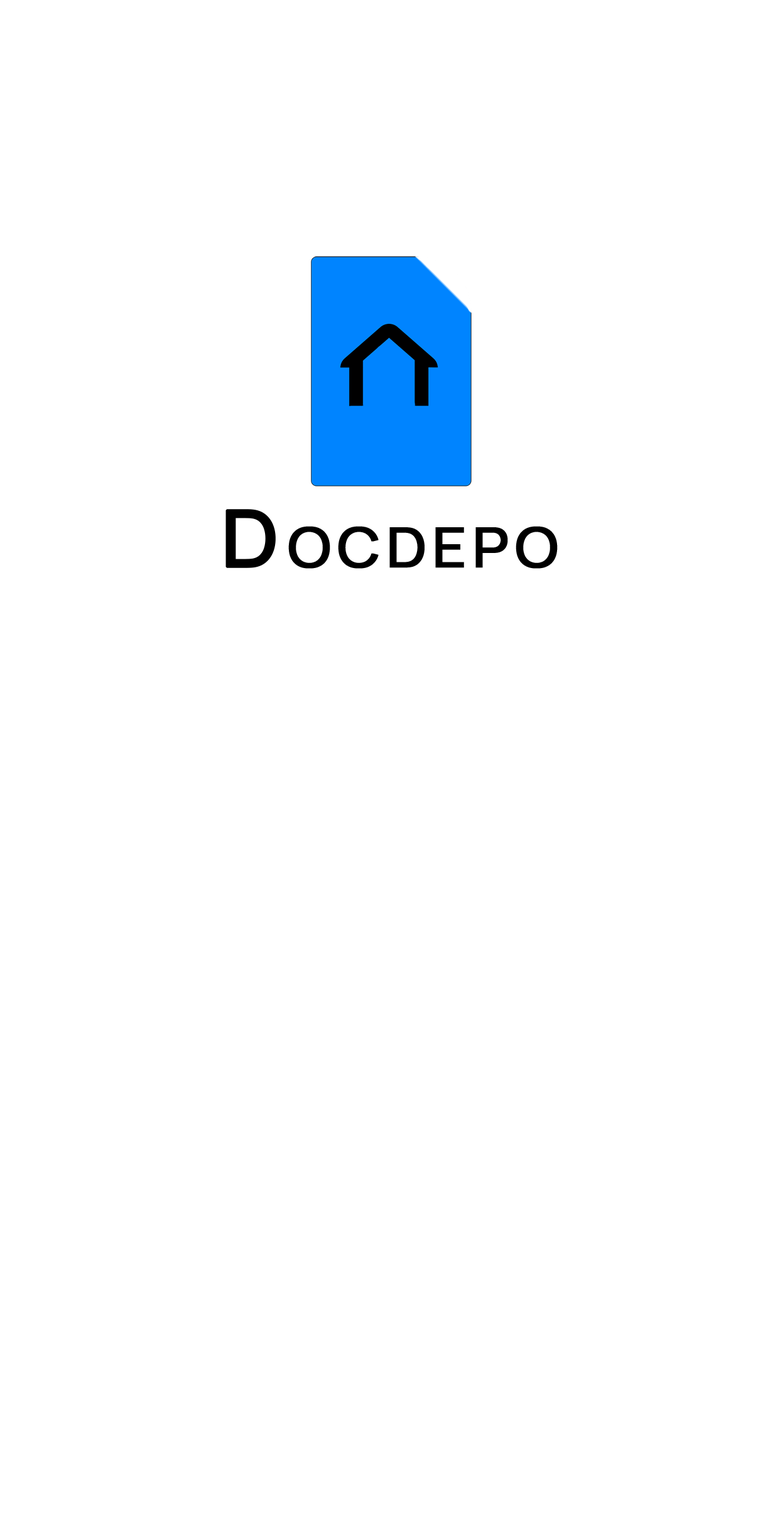
<style>
.page{position:relative;width:780px;height:1529px;background:#ffffff}
.page>*{position:absolute;margin:0}
.t1{font:78.5px "Manrope-Medium";letter-spacing:0.08em;color:#000000;font-variant:small-caps;font-weight:bold;scale:1.07 1}
</style>
<div class="page">
<p class="t1" style="left:225px;top:509px;width:332px;height:60px">Docdepo</p>
</div>
